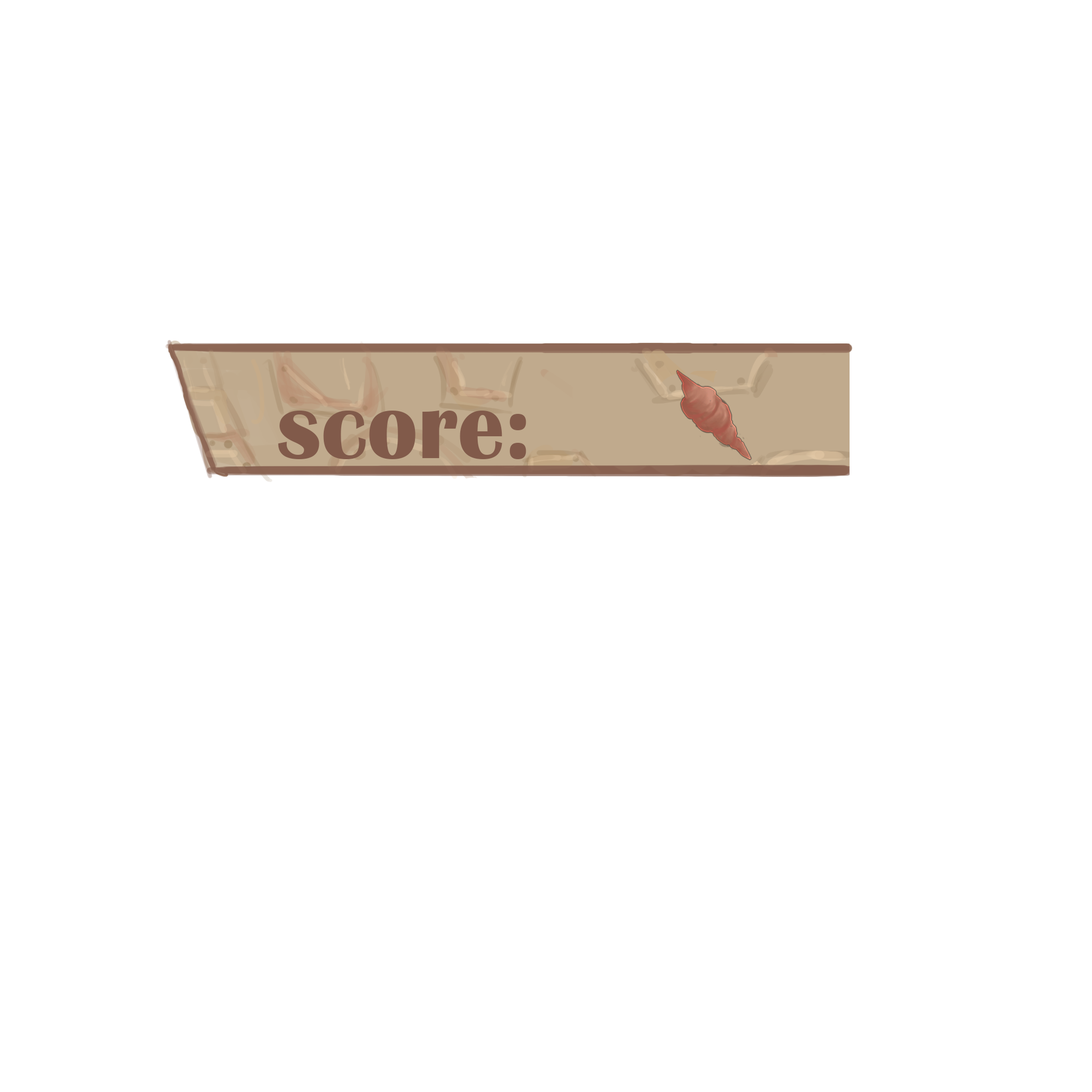
<style>
.page{position:relative;width:1092px;height:1092px;background:#ffffff}
.page>*{position:absolute;margin:0}
.t1{font:94px "BritannicBold";color:#815a4a}
</style>
<div class="page">
<p class="t1" style="left:278px;top:410px;width:248px;height:49px">score:</p>
</div>
